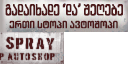
<style>
.page{position:relative;width:128px;height:64px;background:#ffffff}
.page>*{position:absolute;margin:0}
.t1{font:16px "ArchyEDT-Bold";letter-spacing:-0.02em;color:#4b191a;scale:0.9 1}
.t2{font:10.2px "ArchyEDT-Bold";color:#4b191a;scale:1.18 1}
</style>
<div class="page">
<p class="t1" style="left:5px;top:3px;width:118px;height:13px">გადაიხადე ‘და’ შეღებე</p>
<p class="t2" style="left:9px;top:20px;width:109px;height:9px">ერთი სტოპი ავტოშოპი</p>
</div>
